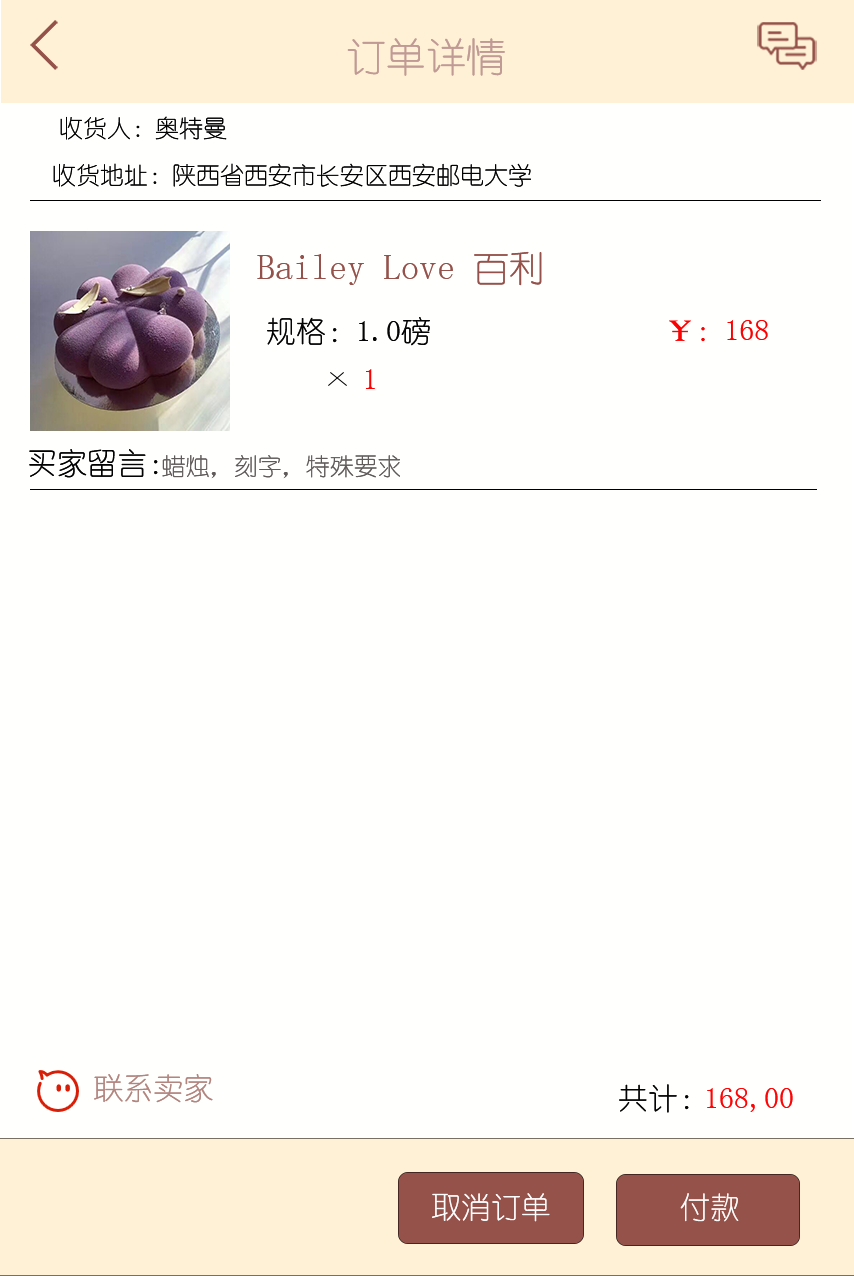
<style>
.page{position:relative;width:854px;height:1276px;background:#fffffe}
.page>*{position:absolute;margin:0}
.t1{font:40px "YouYuan";color:#c09a95}
.t2{font:24px "YouYuan";color:#030303}
.t3{font:36px "YouYuan";color:#95524a}
.t4{font:30px "YouYuan";color:#040404}
.t5{font:30px "YouYuan";color:#fb0101}
.t6{font:30px "YouYuan";color:#020202}
.t7{font:24px "YouYuan";color:#605b5b}
.t8{font:30px "YouYuan";color:#b3857f}
.t9{font:30px "YouYuan";color:#030303}
.t10{font:30px "YouYuan";color:#fe0404}
.t11{font:30px "YouYuan";color:#fefefe}
.t12{font:30px "YouYuan";color:#fcfcfb}
</style>
<div class="page">
<p class="t1" style="left:347px;top:38px;width:158px;height:38px">订单详情</p>
<p class="t2" style="left:60px;top:116px;width:167px;height:24px">收货人：奥特曼</p>
<p class="t2" style="left:53px;top:163px;width:478px;height:24px">收货地址：陕西省西安市长安区西安邮电大学</p>
<p class="t3" style="left:257px;top:251px;width:285px;height:35px">Bailey Love 百利</p>
<p class="t4" style="left:267px;top:317px;width:163px;height:29px">规格：1.0磅</p>
<p class="t5" style="left:669px;top:320px;width:99px;height:22px">￥：168</p>
<p class="t5" style="left:366px;top:369px;width:9px;height:20px">1</p>
<p class="t6" style="left:29px;top:449px;width:129px;height:29px">买家留言：</p>
<p class="t7" style="left:162px;top:455px;width:238px;height:24px">蜡烛，刻字，特殊要求</p>
<p class="t8" style="left:94px;top:1074px;width:119px;height:29px">联系卖家</p>
<p class="t9" style="left:619px;top:1084px;width:70px;height:29px">共计：</p>
<p class="t10" style="left:707px;top:1088px;width:86px;height:24px">168,00</p>
<p class="t11" style="left:432px;top:1193px;width:118px;height:29px">取消订单</p>
<p class="t12" style="left:680px;top:1193px;width:59px;height:29px">付款</p>
</div>
